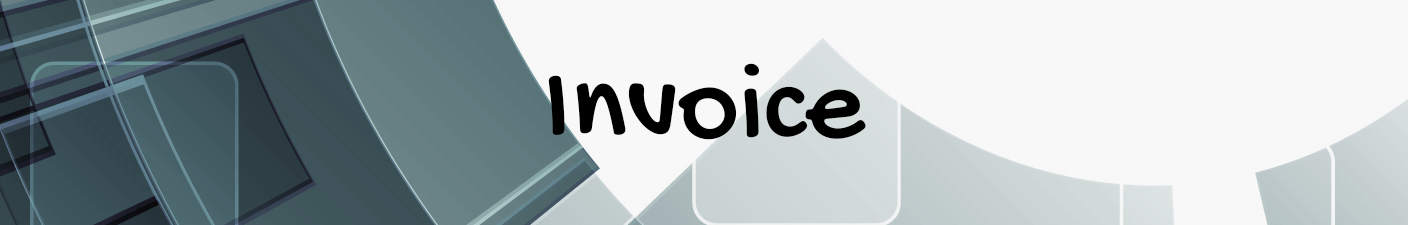
<style>
.page{position:relative;width:1408px;height:225px;background:#f8f8f8}
.page>*{position:absolute;margin:0}
.t1{font:116.7px "GochiHand-Regular";color:#000000}
</style>
<div class="page">
<p class="t1" style="left:548px;top:63px;width:318px;height:77px">Invoice</p>
</div>
